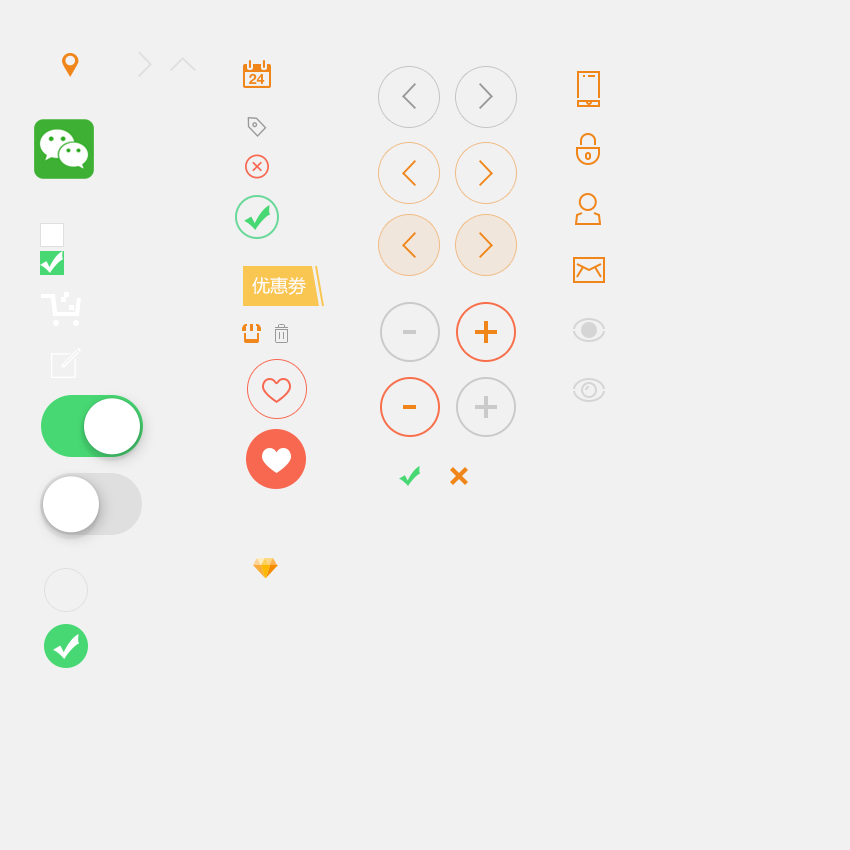
<style>
.page{position:relative;width:850px;height:850px;background:#f1f1f1}
.page>*{position:absolute;margin:0}
.t1{font:18px "MicrosoftYaHei";color:#ffffff}
.t2{font:48px "ArialMT";color:#f08519}
.t3{font:48px "ArialMT";color:#cacaca}
</style>
<div class="page">
<p class="t1" style="left:252px;top:277px;width:54px;height:18px">优惠劵</p>
<p class="t2" style="left:475px;top:321px;width:22px;height:22px">+</p>
<p class="t3" style="left:475px;top:396px;width:22px;height:22px">+</p>
</div>
